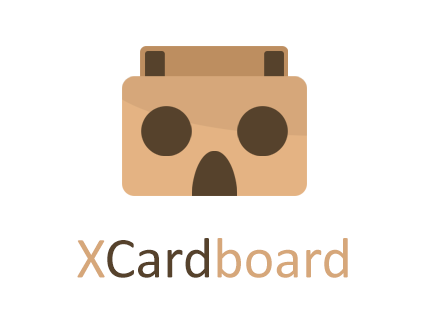
<style>
.page{position:relative;width:426px;height:320px;background:#ffffff}
.page>*{position:absolute;margin:0}
.t1{font:57.9px "Calibri";color:#d6a77a}
.t2{font:57.9px "Calibri";color:#56422c}
</style>
<div class="page">
<p class="t1" style="left:77px;top:238px;width:271px;height:40px">X<span class="t2">Card</span>board</p>
</div>
